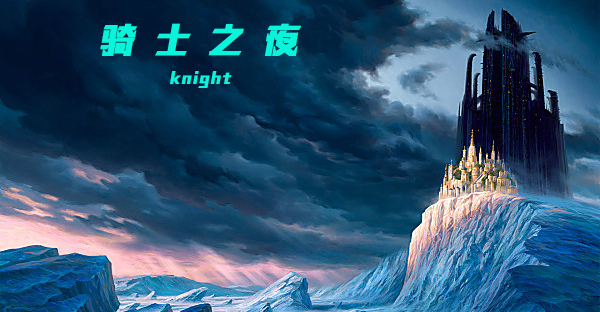
<style>
.page{position:relative;width:600px;height:312px}
.page>*{position:absolute;margin:0}
.t1{font:35.1px "HYZhuZiLieYanTiW";color:#0af4db;font-weight:bold;font-style:italic}
.t2{font:16.3px "HYZhuZiLieYanTiW";color:#0af4db;font-weight:bold;font-style:italic}
</style>
<div class="page">
<p class="t1" style="left:100px;top:23px;width:201px;height:33px">骑 士 之 夜</p>
<p class="t2" style="left:170px;top:71px;width:62px;height:17px">knight</p>
</div>
